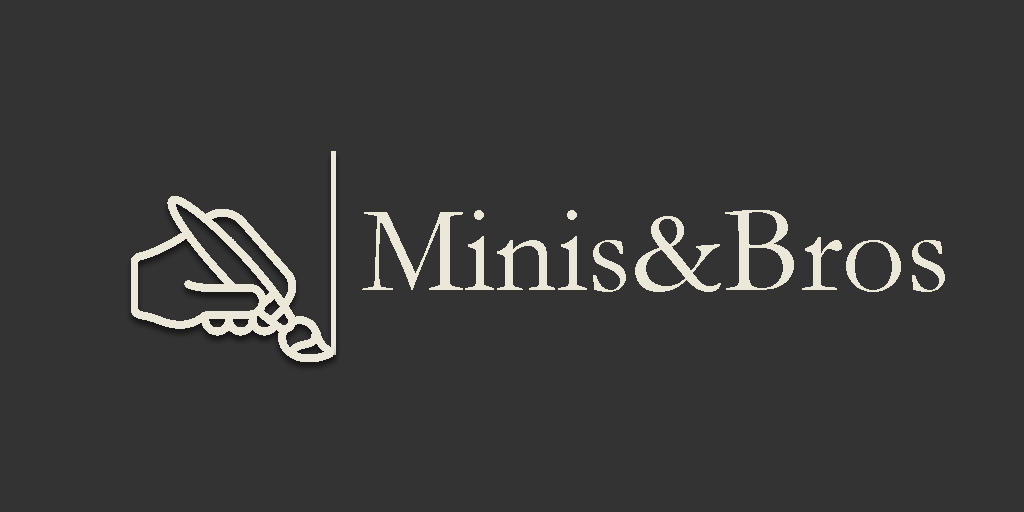
<style>
.page{position:relative;width:1024px;height:512px;background:#333333}
.page>*{position:absolute;margin:0}
.t1{font:125px "Garamond";color:#ebe7d9}
</style>
<div class="page">
<p class="t1" style="left:362px;top:210px;width:583px;height:82px">Minis&amp;Bros</p>
</div>
